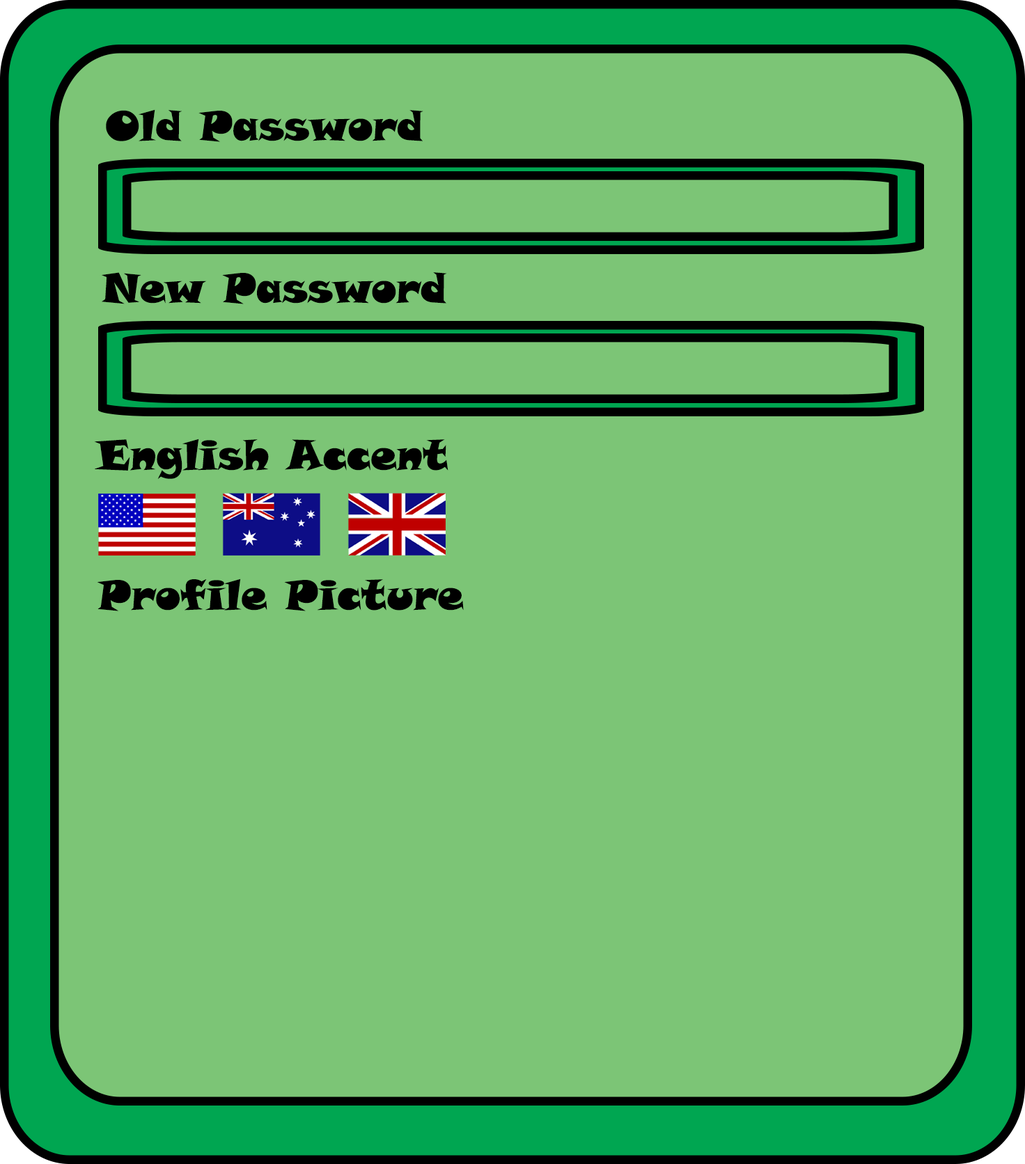
<style>
.page{position:relative;width:1025px;height:1164px;background:#7cc576}
.page>*{position:absolute;margin:0}
.t1{font:41.3px "SnapITC-Regular";color:#000000}
</style>
<div class="page">
<p class="t1" style="left:106px;top:109px;width:317px;height:33px">Old Password</p>
<p class="t1" style="left:102px;top:272px;width:345px;height:32px">New Password</p>
<p class="t1" style="left:94px;top:439px;width:354px;height:40px">English Accent</p>
<p class="t1" style="left:97px;top:578px;width:367px;height:33px">Profile Picture</p>
</div>
